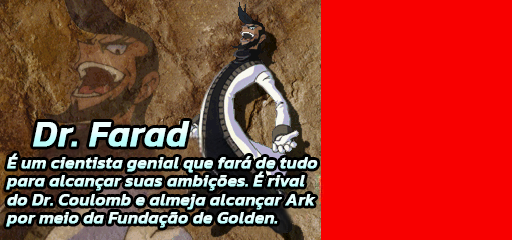
<style>
.page{position:relative;width:512px;height:240px;background:#f80000}
.page>*{position:absolute;margin:0}
.t1{font:36px "Kanit-MediumItalic";font-weight:bold}
.t2{font:17px "Kanit-MediumItalic";font-weight:bold}
.t3{font:17px "Kanit-MediumItalic";color:#ebfefd;font-weight:bold}
</style>
<div class="page">
<p class="t1" style="left:33px;top:121px;width:157px;height:26px">Dr. Farad</p>
<p class="t2" style="left:7px;top:153px;width:311px;height:20px">É um cientista genial que fará de tudo</p>
<p class="t2" style="left:6px;top:171px;width:299px;height:20px">para alcançar suas ambições. É rival</p>
<p class="t3" style="left:7px;top:194px;width:309px;height:16px">do Dr. Coulomb e almeja alcançar Ark</p>
<p class="t3" style="left:6px;top:212px;width:272px;height:16px">por meio da Fundação de Golden.</p>
</div>
